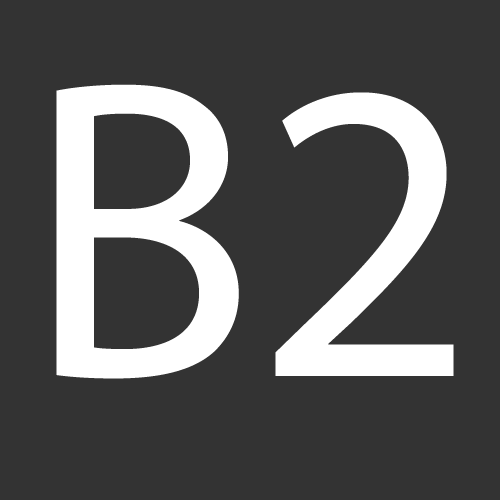
<style>
.page{position:relative;width:500px;height:500px;background:#333333}
.page>*{position:absolute;margin:0}
.t1{font:428.6px "MyriadPro-Regular";color:#ffffff}
</style>
<div class="page">
<p class="t1" style="left:56px;top:84px;width:398px;height:295px">B2</p>
</div>
